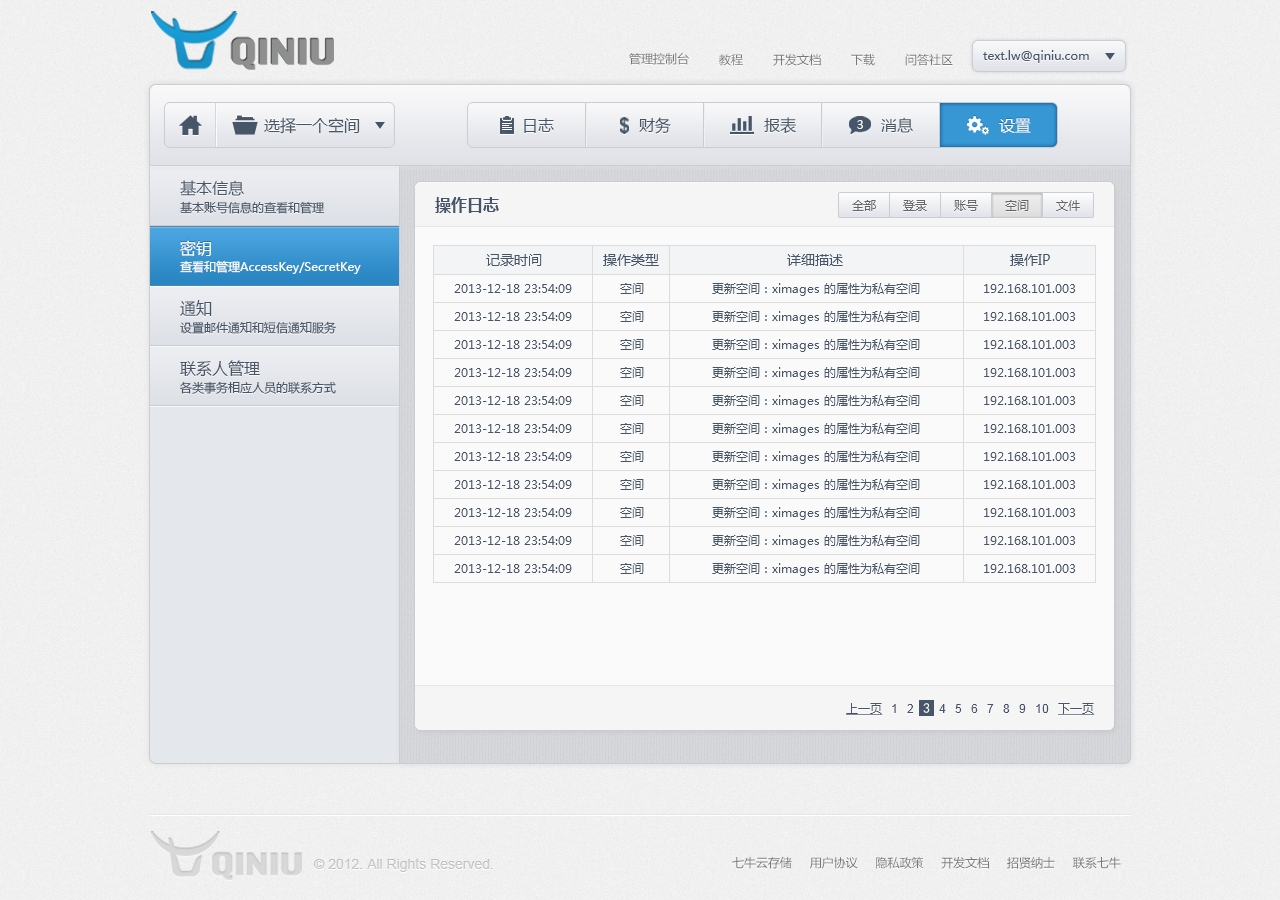
<style>
.page{position:relative;width:1280px;height:900px}
.page>*{position:absolute;margin:0}
.t1{font:12px "MicrosoftYaHei";color:#787878}
.t2{font:12px "MicrosoftYaHei";color:#465567}
.t3{font:16px "MicrosoftYaHei";color:#465567}
.t4{font:12px "MicrosoftYaHei";color:#f8f8f9}
.t5{font:16px "MicrosoftYaHei";color:#ffffff}
.t6{font:16px "MicrosoftYaHei-Bold";color:#465567}
.t7{font:12px "MicrosoftYaHei";color:#666666}
.t8{font:14px "MicrosoftYaHei";color:#465567}
.t9{font:12px "MicrosoftYaHei";color:#ffffff}
.t10{font:12px "ArialMT";color:#465567}
.t11{font:12px "MicrosoftYaHei";color:#465567;text-decoration:underline}
.t12{font:14px "SimHei";color:#ffffff}
.t13{font:14px "ArialMT";color:#c6c6c6}
</style>
<div class="page">
<p class="t1" style="left:629px;top:52px;width:60px;height:13px">管理控制台</p>
<p class="t1" style="left:719px;top:54px;width:24px;height:12px">教程</p>
<p class="t1" style="left:773px;top:54px;width:48px;height:12px">开发文档</p>
<p class="t1" style="left:851px;top:54px;width:24px;height:12px">下载</p>
<p class="t1" style="left:905px;top:54px;width:48px;height:12px">问答社区</p>
<p class="t2" style="left:983px;top:50px;width:106px;height:13px">text.lw@qiniu.com</p>
<p class="t3" style="left:264px;top:117px;width:96px;height:17px">选择一个空间</p>
<p class="t3" style="left:524px;top:118px;width:30px;height:15px">日志</p>
<p class="t3" style="left:639px;top:117px;width:32px;height:17px">财务</p>
<p class="t3" style="left:764px;top:117px;width:32px;height:17px">报表</p>
<p class="t4" style="left:857px;top:120px;width:6px;height:9px">3</p>
<p class="t3" style="left:881px;top:117px;width:32px;height:16px">消息</p>
<p class="t5" style="left:999px;top:118px;width:32px;height:15px">设置</p>
<p class="t3" style="left:180px;top:180px;width:64px;height:16px">基本信息</p>
<p class="t6" style="left:435px;top:197px;width:64px;height:16px">操作日志</p>
<p class="t2" style="left:180px;top:201px;width:145px;height:13px">基本账号信息的查看和管理</p>
<p class="t7" style="left:852px;top:200px;width:24px;height:11px">全部</p>
<p class="t7" style="left:903px;top:200px;width:24px;height:11px">登录</p>
<p class="t7" style="left:954px;top:200px;width:24px;height:11px">账号</p>
<p class="t7" style="left:1005px;top:200px;width:24px;height:11px">空间</p>
<p class="t7" style="left:1056px;top:200px;width:24px;height:11px">文件</p>
<p class="t5" style="left:180px;top:240px;width:31px;height:17px">密钥</p>
<p class="t8" style="left:486px;top:254px;width:56px;height:12px">记录时间</p>
<p class="t8" style="left:603px;top:254px;width:56px;height:12px">操作类型</p>
<p class="t8" style="left:787px;top:254px;width:56px;height:12px">详细描述</p>
<p class="t8" style="left:1010px;top:254px;width:40px;height:12px">操作IP</p>
<p class="t9" style="left:180px;top:260px;width:181px;height:14px">查看和管理AccessKey/SecretKey</p>
<p class="t2" style="left:454px;top:284px;width:118px;height:9px">2013-12-18 23:54:09</p>
<p class="t2" style="left:620px;top:283px;width:24px;height:11px">空间</p>
<p class="t2" style="left:712px;top:283px;width:208px;height:13px">更新空间：ximages 的属性为私有空间</p>
<p class="t2" style="left:984px;top:284px;width:92px;height:9px">192.168.101.003</p>
<p class="t3" style="left:180px;top:300px;width:32px;height:16px">通知</p>
<p class="t2" style="left:454px;top:312px;width:118px;height:9px">2013-12-18 23:54:09</p>
<p class="t2" style="left:620px;top:311px;width:24px;height:11px">空间</p>
<p class="t2" style="left:712px;top:311px;width:208px;height:13px">更新空间：ximages 的属性为私有空间</p>
<p class="t2" style="left:984px;top:312px;width:92px;height:9px">192.168.101.003</p>
<p class="t2" style="left:180px;top:321px;width:156px;height:13px">设置邮件通知和短信通知服务</p>
<p class="t2" style="left:454px;top:340px;width:118px;height:9px">2013-12-18 23:54:09</p>
<p class="t2" style="left:620px;top:339px;width:24px;height:11px">空间</p>
<p class="t2" style="left:712px;top:339px;width:208px;height:13px">更新空间：ximages 的属性为私有空间</p>
<p class="t2" style="left:984px;top:340px;width:92px;height:9px">192.168.101.003</p>
<p class="t3" style="left:180px;top:360px;width:80px;height:17px">联系人管理</p>
<p class="t2" style="left:454px;top:368px;width:118px;height:9px">2013-12-18 23:54:09</p>
<p class="t2" style="left:620px;top:367px;width:24px;height:11px">空间</p>
<p class="t2" style="left:712px;top:367px;width:208px;height:13px">更新空间：ximages 的属性为私有空间</p>
<p class="t2" style="left:984px;top:368px;width:92px;height:9px">192.168.101.003</p>
<p class="t2" style="left:180px;top:381px;width:156px;height:13px">各类事务相应人员的联系方式</p>
<p class="t2" style="left:454px;top:396px;width:118px;height:9px">2013-12-18 23:54:09</p>
<p class="t2" style="left:620px;top:395px;width:24px;height:11px">空间</p>
<p class="t2" style="left:712px;top:395px;width:208px;height:13px">更新空间：ximages 的属性为私有空间</p>
<p class="t2" style="left:984px;top:396px;width:92px;height:9px">192.168.101.003</p>
<p class="t2" style="left:454px;top:424px;width:118px;height:9px">2013-12-18 23:54:09</p>
<p class="t2" style="left:620px;top:423px;width:24px;height:11px">空间</p>
<p class="t2" style="left:712px;top:423px;width:208px;height:13px">更新空间：ximages 的属性为私有空间</p>
<p class="t2" style="left:984px;top:424px;width:92px;height:9px">192.168.101.003</p>
<p class="t2" style="left:454px;top:452px;width:118px;height:9px">2013-12-18 23:54:09</p>
<p class="t2" style="left:620px;top:451px;width:24px;height:11px">空间</p>
<p class="t2" style="left:712px;top:451px;width:208px;height:13px">更新空间：ximages 的属性为私有空间</p>
<p class="t2" style="left:984px;top:452px;width:92px;height:9px">192.168.101.003</p>
<p class="t2" style="left:454px;top:480px;width:118px;height:9px">2013-12-18 23:54:09</p>
<p class="t2" style="left:620px;top:479px;width:24px;height:11px">空间</p>
<p class="t2" style="left:712px;top:479px;width:208px;height:13px">更新空间：ximages 的属性为私有空间</p>
<p class="t2" style="left:984px;top:480px;width:92px;height:9px">192.168.101.003</p>
<p class="t2" style="left:454px;top:508px;width:118px;height:9px">2013-12-18 23:54:09</p>
<p class="t2" style="left:620px;top:507px;width:24px;height:11px">空间</p>
<p class="t2" style="left:712px;top:507px;width:208px;height:13px">更新空间：ximages 的属性为私有空间</p>
<p class="t2" style="left:984px;top:508px;width:92px;height:9px">192.168.101.003</p>
<p class="t2" style="left:454px;top:536px;width:118px;height:9px">2013-12-18 23:54:09</p>
<p class="t2" style="left:620px;top:535px;width:24px;height:11px">空间</p>
<p class="t2" style="left:712px;top:535px;width:208px;height:13px">更新空间：ximages 的属性为私有空间</p>
<p class="t2" style="left:984px;top:536px;width:92px;height:9px">192.168.101.003</p>
<p class="t2" style="left:454px;top:564px;width:118px;height:9px">2013-12-18 23:54:09</p>
<p class="t2" style="left:620px;top:563px;width:24px;height:11px">空间</p>
<p class="t2" style="left:712px;top:563px;width:208px;height:13px">更新空间：ximages 的属性为私有空间</p>
<p class="t2" style="left:984px;top:564px;width:92px;height:9px">192.168.101.003</p>
<p class="t10" style="left:846px;top:703px;width:249px;height:12px"><span class="t11">上一页</span>   1   2   3   4   5   6   7   8   9   10   <span class="t11">下一页</span></p>
<p class="t12" style="left:923px;top:703px;width:7px;height:10px">3</p>
<p class="t1" style="left:732px;top:857px;width:389px;height:12px">七牛云存储     用户协议     隐私政策     开发文档     招贤纳士     联系七牛</p>
<p class="t13" style="left:313px;top:858px;width:180px;height:14px">© 2012. All Rights Reserved.</p>
</div>
